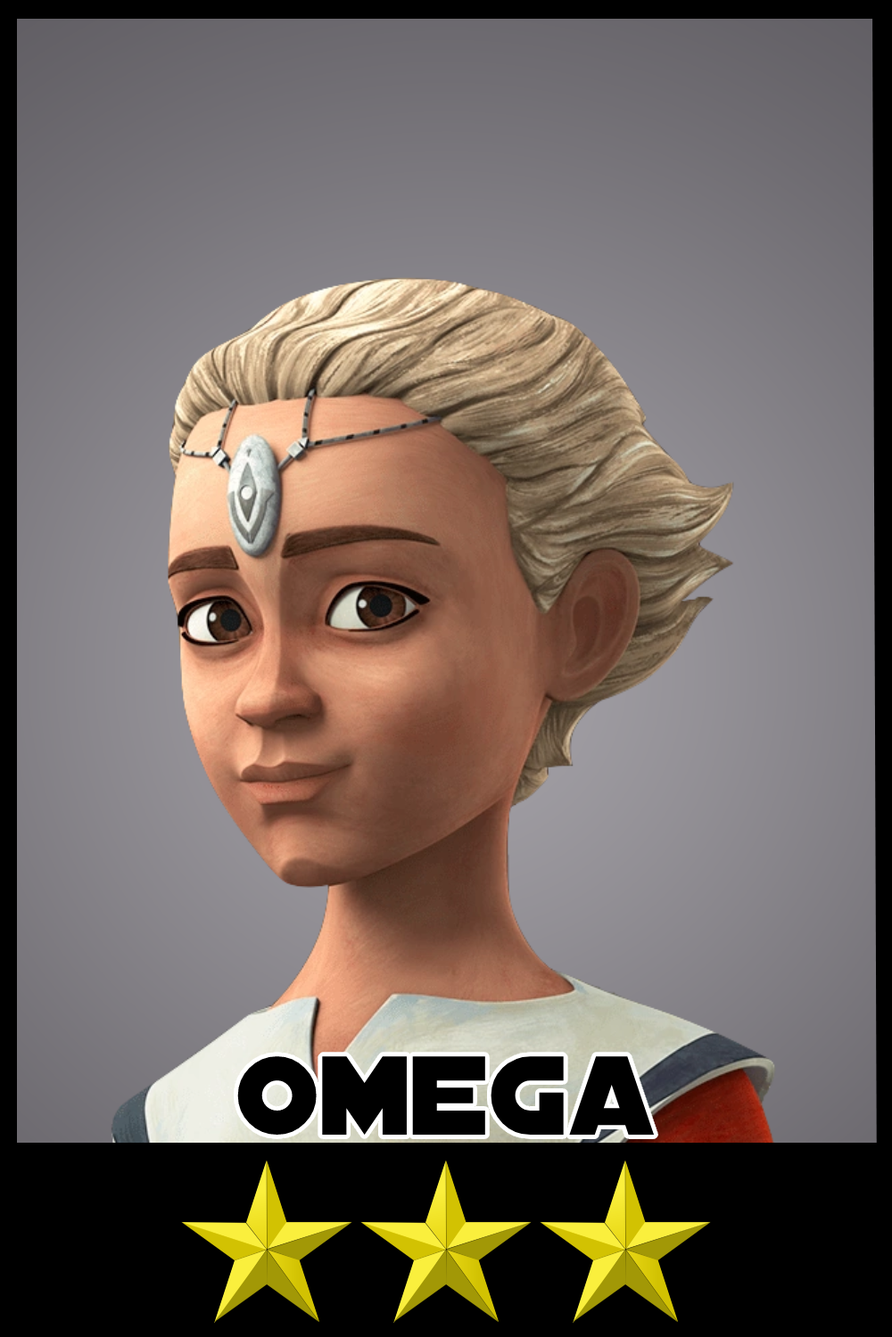
<style>
.page{position:relative;width:892px;height:1337px}
.page>*{position:absolute;margin:0}
.t1{font:120.5px "DistantGalaxy";color:#000000}
</style>
<div class="page">
<p class="t1" style="left:237px;top:1057px;width:417px;height:78px">omega</p>
</div>
